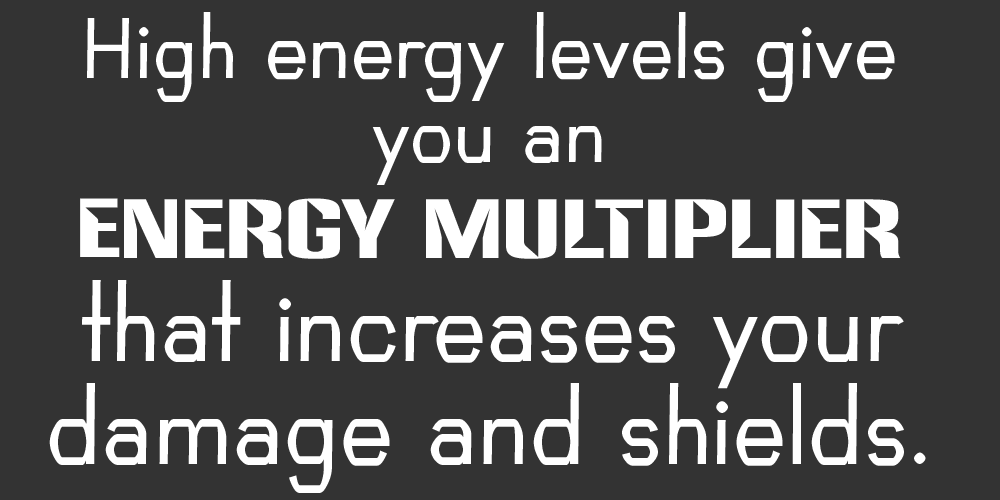
<style>
.page{position:relative;width:1000px;height:500px;background:#333333}
.page>*{position:absolute;margin:0}
.t1{font:86px "Bespoke-wQeoCM0HwU";color:#ffffff}
.t2{font:70px "Bespoke-wQeoCM0HwU";color:#ffffff}
.t3{font:80px "Anklepants-Regular";color:#ffffff}
</style>
<div class="page">
<p class="t1" style="left:49px;top:12px;width:877px;height:481px;text-align:center"><span class="t2">High energy levels give you an<br></span><span class="t3">Energy Multiplier </span>that increases your damage and shields.</p>
</div>
